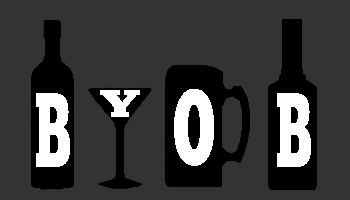
<style>
.page{position:relative;width:350px;height:200px;background:#333333}
.page>*{position:absolute;margin:0}
.t1{font:105.1px "ChunkFive-Roman";color:#ffffff;scale:0.54 1}
.t2{font:105.5px "ChunkFive-Roman";color:#ffffff;scale:0.49 1}
.t3{font:38px "ChunkFive-Roman";color:#ffffff;scale:1.5 1}
</style>
<div class="page">
<p class="t1" style="left:174px;top:89px;width:40px;height:77px">O</p>
<p class="t2" style="left:36px;top:93px;width:34px;height:74px">B</p>
<p class="t3" style="left:100px;top:90px;width:40px;height:27px">Y</p>
<p class="t2" style="left:277px;top:93px;width:34px;height:74px">B</p>
</div>
